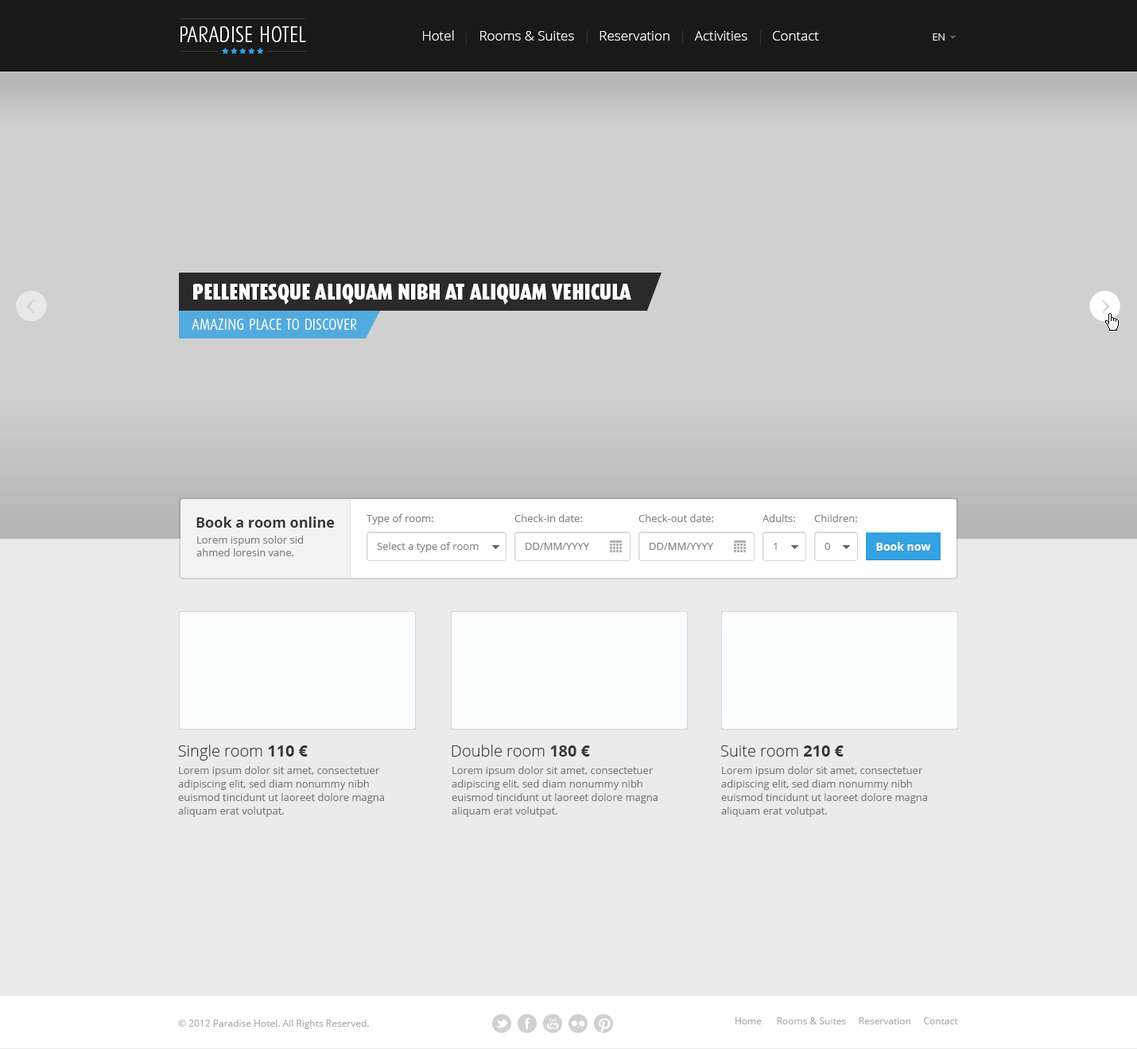
<style>
.page{position:relative;width:1137px;height:1049px;background:#ebebeb}
.page>*{position:absolute;margin:0}
.t1{font:22.3px "DaxCondensed-Light";color:#ffffff;text-transform:uppercase}
.t2{font:13.5px "OpenSans-Light";color:#ffffff}
.t3{font:10.3px "OpenSans-Light";color:#ffffff}
.t4{font:22.3px "DaxCondensed-Black";color:#ffffff;text-transform:uppercase}
.t5{font:15.9px "DaxCondensed-Light";color:#ffffff;text-transform:uppercase}
.t6{font:14.3px "OpenSans-Bold";color:#373535}
.t7{font:10.3px "OpenSans";color:#868585}
.t8{font:10.3px/12.7px "OpenSans";color:#818080}
.t9{font:10.3px "OpenSans"}
.t10{font:11.1px "OpenSans-Bold";color:#ffffff}
.t11{font:15.9px "OpenSans-Light";color:#373535}
.t12{font:15.9px "OpenSans-Bold";color:#373535}
.t13{font:10.3px/13.5px "OpenSans";color:#7d7c7c}
.t14{font:9.5px "OpenSans";color:#aeadad}
</style>
<div class="page">
<p class="t1" style="left:180px;top:26px;width:126px;height:16px">Paradise hotel</p>
<p class="t2" style="left:423px;top:30px;width:396px;height:11px">Hotel       Rooms &amp; Suites       Reservation       Activities       Contact</p>
<p class="t3" style="left:932px;top:33px;width:12px;height:8px">EN</p>
<p class="t4" style="left:193px;top:284px;width:438px;height:20px">Pellentesque aliquam nibh at aliquam vehicula</p>
<p class="t5" style="left:192px;top:319px;width:165px;height:11px">Amazing place to discover</p>
<p class="t6" style="left:196px;top:517px;width:139px;height:11px">Book a room online</p>
<p class="t7" style="left:366px;top:514px;width:67px;height:11px">Type of room:</p>
<p class="t7" style="left:514px;top:514px;width:69px;height:8px">Check-in date:</p>
<p class="t7" style="left:638px;top:514px;width:76px;height:8px">Check-out date:</p>
<p class="t7" style="left:762px;top:514px;width:33px;height:8px">Adults:</p>
<p class="t7" style="left:814px;top:514px;width:43px;height:8px">Children:</p>
<p class="t8" style="left:196px;top:536px;width:107px;height:20px">Lorem ispum solor sid<br>ahmed loresin vane.</p>
<p class="t7" style="left:377px;top:542px;width:101px;height:10px">Select a type of room</p>
<p class="t7" style="left:525px;top:543px;width:64px;height:7px">DD/MM/YYYY</p>
<p class="t7" style="left:649px;top:543px;width:64px;height:7px">DD/MM/YYYY</p>
<p class="t9" style="left:773px;top:543px;width:4px;height:7px">1</p>
<p class="t7" style="left:824px;top:543px;width:6px;height:7px">0</p>
<p class="t10" style="left:876px;top:542px;width:55px;height:9px">Book now</p>
<p class="t11" style="left:178px;top:745px;width:130px;height:16px">Single room<span class="t12"> 110 €</span></p>
<p class="t11" style="left:451px;top:745px;width:139px;height:12px">Double room<span class="t12"> 180 €</span></p>
<p class="t11" style="left:721px;top:746px;width:122px;height:11px">Suite room<span class="t12"> 210 €</span></p>
<p class="t13" style="left:178px;top:766px;width:206px;height:51px">Lorem ipsum dolor sit amet, consectetuer<br>adipiscing elit, sed diam nonummy nibh<br>euismod tincidunt ut laoreet dolore magna<br>aliquam erat volutpat.</p>
<p class="t13" style="left:451px;top:766px;width:206px;height:51px">Lorem ipsum dolor sit amet, consectetuer<br>adipiscing elit, sed diam nonummy nibh<br>euismod tincidunt ut laoreet dolore magna<br>aliquam erat volutpat.</p>
<p class="t13" style="left:721px;top:766px;width:206px;height:51px">Lorem ipsum dolor sit amet, consectetuer<br>adipiscing elit, sed diam nonummy nibh<br>euismod tincidunt ut laoreet dolore magna<br>aliquam erat volutpat.</p>
<p class="t14" style="left:178px;top:1020px;width:191px;height:9px">© 2012 Paradise Hotel. All Rights Reserved.</p>
<p class="t14" style="left:735px;top:1017px;width:223px;height:8px">Home      Rooms &amp; Suites     Reservation     Contact</p>
</div>
